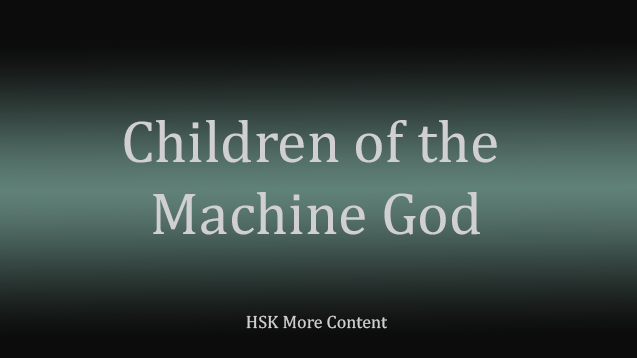
<style>
.page{position:relative;width:637px;height:358px}
.page>*{position:absolute;margin:0}
.t1{font:60px "Cambria";color:#d0d0d0}
.t2{font:18px "Cambria";color:#d0d0d0}
</style>
<div class="page">
<p class="t1" style="left:124px;top:120px;width:373px;height:209px;text-align:center">Children of the <br>Machine God<br><br><span class="t2">HSK More Content</span></p>
</div>
